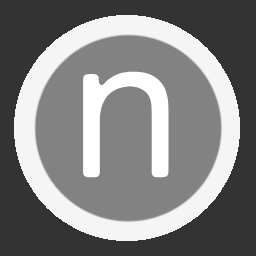
<style>
.page{position:relative;width:256px;height:256px;background:#333333}
.page>*{position:absolute;margin:0}
.t1{font:200px "AlteHaasGrotesk";color:#ffffff}
</style>
<div class="page">
<p class="t1" style="left:83px;top:71px;width:86px;height:107px">n</p>
</div>
